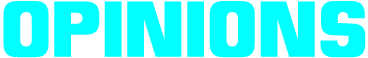
<style>
.page{position:relative;width:368px;height:58px;background:#00ffff}
.page>*{position:absolute;margin:0}
.t1{font:72px "NeographikMT";color:#00ffff}
</style>
<div class="page">
<p class="t1" style="left:3px;top:1px;width:363px;height:57px">OPINIONS</p>
</div>
